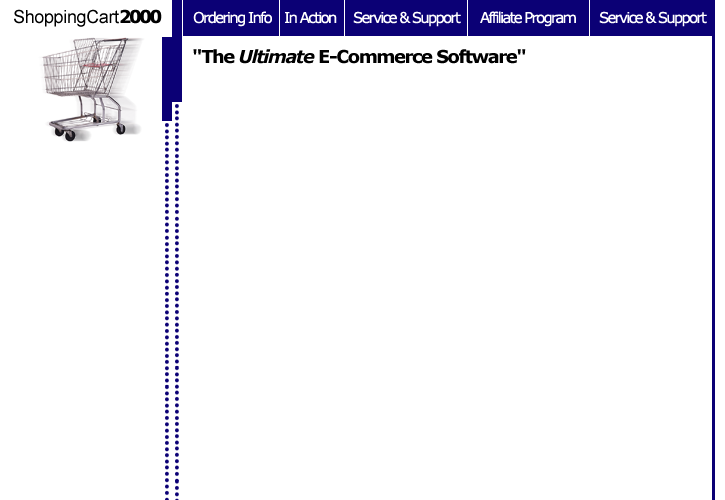
<style>
.page{position:relative;width:725px;height:500px;background:#ffffff}
.page>*{position:absolute;margin:0}
.t1{font:18px "ArialMT";letter-spacing:-0.02em;color:#000000}
.t2{font:18px "Verdana-Bold";letter-spacing:-0.14em;color:#000000}
.t3{font:15px "Verdana";letter-spacing:-0.12em;color:#ffffff}
.t4{font:18px "Verdana-Bold";letter-spacing:-0.08em;color:#000000}
.t5{font:18px "Verdana-BoldItalic";letter-spacing:-0.08em;color:#000000}
</style>
<div class="page">
<p class="t1" style="left:14px;top:9px;width:148px;height:18px">ShoppingCart<span class="t2">2000</span></p>
<p class="t3" style="left:193px;top:11px;width:79px;height:16px">Ordering Info</p>
<p class="t3" style="left:285px;top:12px;width:52px;height:12px">In Action</p>
<p class="t3" style="left:353px;top:11px;width:108px;height:16px">Service &amp; Support</p>
<p class="t3" style="left:480px;top:11px;width:96px;height:16px">Affiliate Program</p>
<p class="t3" style="left:599px;top:11px;width:108px;height:16px">Service &amp; Support</p>
<p class="t4" style="left:193px;top:49px;width:333px;height:15px">"The <span class="t5">Ultimate </span>E-Commerce Software"</p>
</div>
